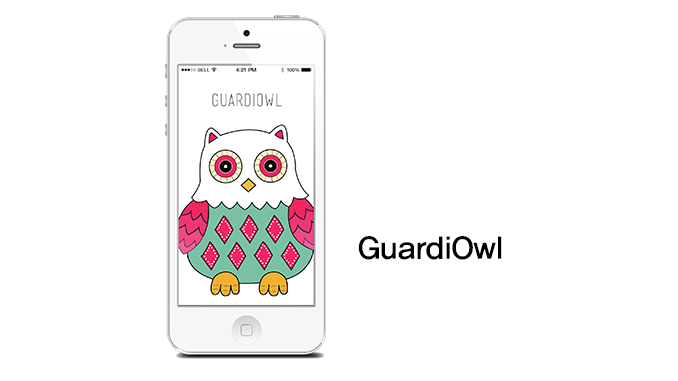
<style>
.page{position:relative;width:678px;height:381px;background:#ffffff}
.page>*{position:absolute;margin:0}
.t1{font:31.3px "YDIYGO340";color:#000000}
</style>
<div class="page">
<p class="t1" style="left:358px;top:236px;width:144px;height:24px">GuardiOwl</p>
</div>
